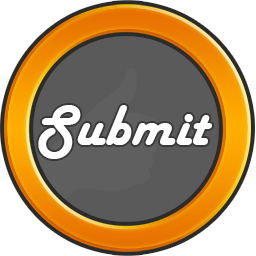
<style>
.page{position:relative;width:256px;height:256px;background:#ffffff}
.page>*{position:absolute;margin:0}
.t1{font:60px "HarlowSolid";color:#ffffff}
</style>
<div class="page">
<p class="t1" style="left:38px;top:105px;width:174px;height:54px">Submit</p>
</div>
